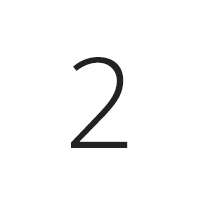
<style>
.page{position:relative;width:200px;height:200px;background:#ffffff}
.page>*{position:absolute;margin:0}
.t1{font:125.2px "OpenSans-Light";color:#222222}
</style>
<div class="page">
<p class="t1" style="left:71px;top:57px;width:57px;height:91px">2</p>
</div>
